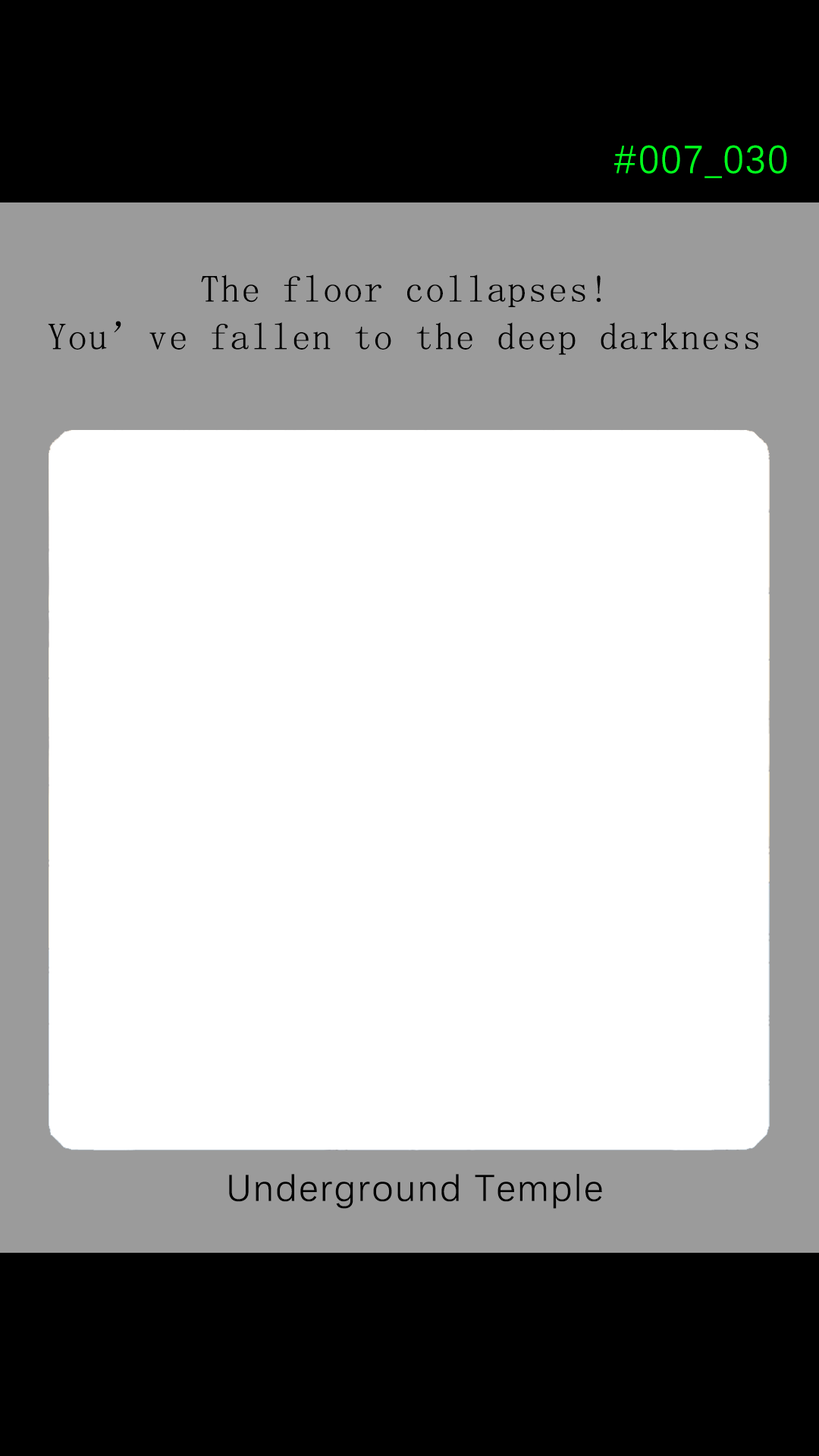
<style>
.page{position:relative;width:819px;height:1456px;background:#ffffff}
.page>*{position:absolute;margin:0}
.t1{font:39.2px "DengXian-Regular";letter-spacing:0.04em;color:#00ff1e}
.t2{font:37.9px/47.6px "SimSun";letter-spacing:0.04em;color:#000000}
.t3{font:37.9px "DengXian-Regular";letter-spacing:0.04em;color:#000000}
</style>
<div class="page">
<p class="t1" style="left:614px;top:145px;width:173px;height:33px">#007_030</p>
<p class="t2" style="left:48px;top:275px;width:710px;height:80px;text-align:center">The floor collapses! <br>You’ve fallen to the deep darkness</p>
<p class="t3" style="left:229px;top:1174px;width:373px;height:35px">Underground Temple</p>
</div>
